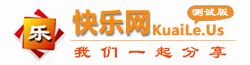
<style>
.page{position:relative;width:250px;height:65px;background:#fefdfd}
.page>*{position:absolute;margin:0}
.t1{font:26px "MicrosoftYaHei";color:#f98b0f}
.t2{font:12px "LiSu";color:#fcfdfc;font-weight:bold}
.t3{font:14px "MicrosoftYaHei";color:#f18c26;font-weight:bold}
.t4{font:18px "LiSu";letter-spacing:0.5em;color:#e84705}
</style>
<div class="page">
<p class="t1" style="left:72px;top:9px;width:77px;height:26px">快乐网</p>
<p class="t2" style="left:191px;top:8px;width:38px;height:9px">测试版</p>
<p class="t3" style="left:153px;top:23px;width:71px;height:13px">KuaiLe.Us</p>
<p class="t4" style="left:74px;top:46px;width:153px;height:13px">我们一起分享</p>
</div>
